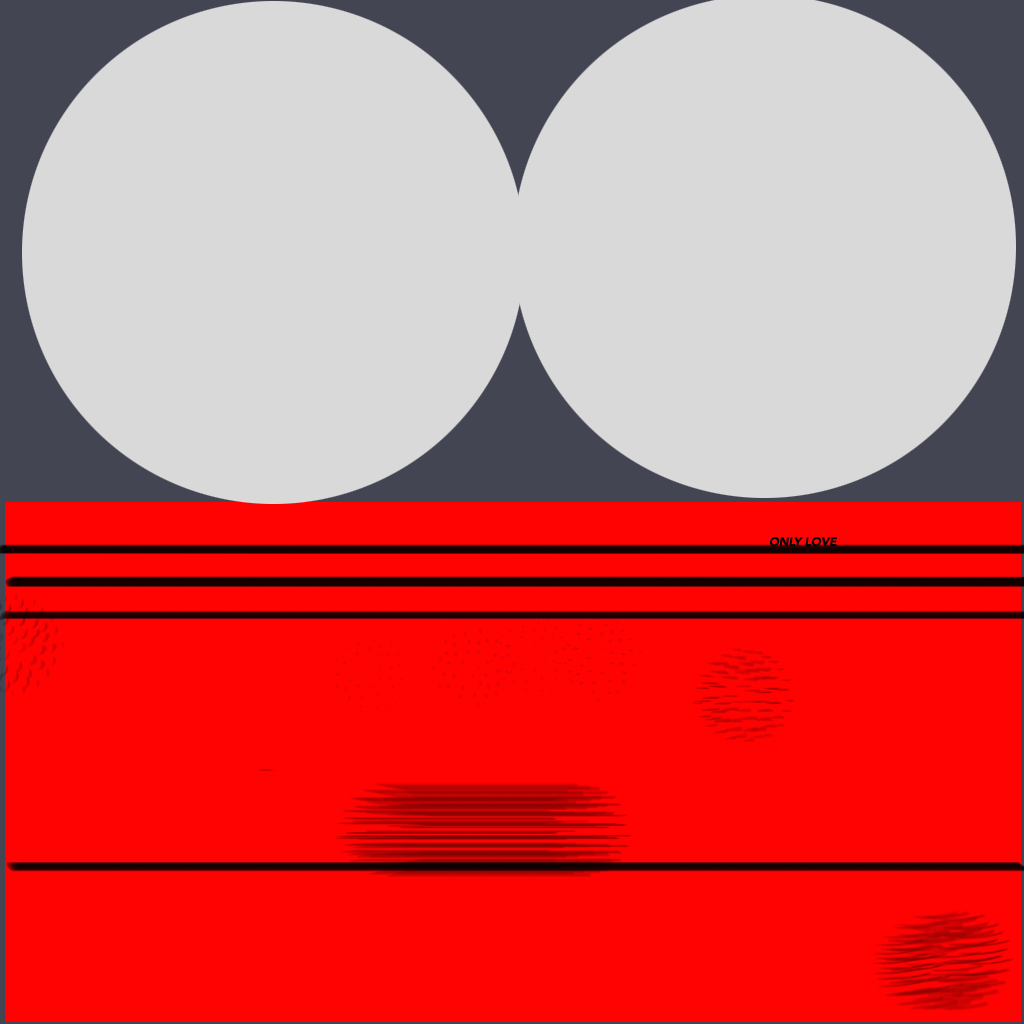
<style>
.page{position:relative;width:1024px;height:1024px;background:#ff0303}
.page>*{position:absolute;margin:0}
.t1{font:12px "Avenir-BlackOblique";letter-spacing:-0.01em;color:#010101}
</style>
<div class="page">
<p class="t1" style="left:769px;top:537px;width:68px;height:10px">ONLY LOVE</p>
</div>
